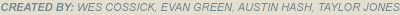
<style>
.page{position:relative;width:400px;height:15px;background:#e3decd}
.page>*{position:absolute;margin:0}
.t1{font:11.2px "Arial-ItalicMT";color:#708790;text-transform:uppercase}
.t2{font:11.2px "Arial-BoldItalicMT";color:#708790;text-transform:uppercase}
</style>
<div class="page">
<p class="t1" style="left:1px;top:3px;width:399px;height:10px"><span class="t2">CREATEd BY: </span>Wes COSSICK, Evan Green, Austin Hash, Taylor Jones</p>
</div>
